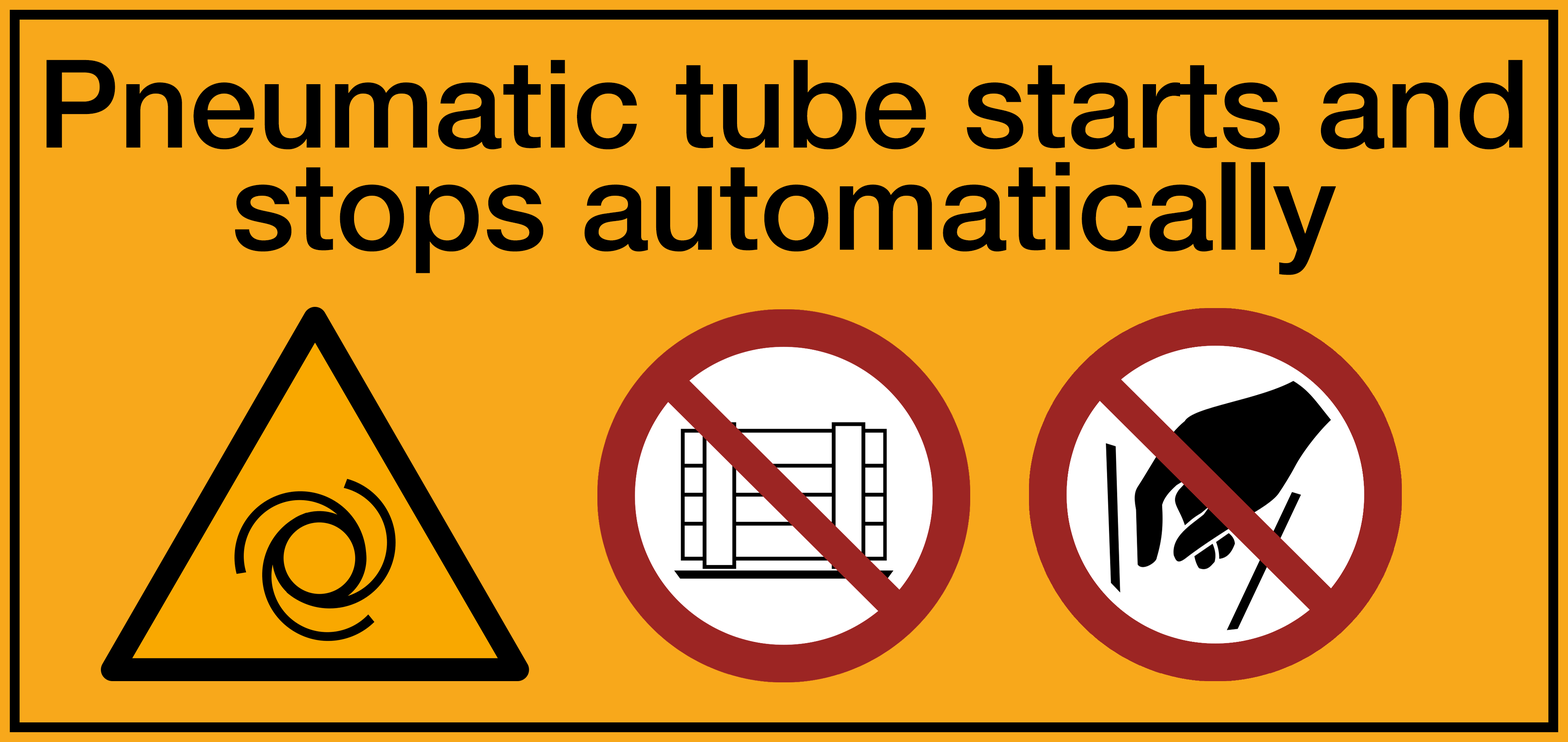
<style>
.page{position:relative;width:1568px;height:742px;background:#f8a81b}
.page>*{position:absolute;margin:0}
.t1{font:122.5px/102.1px "HelveticaNeue-Medium";color:#000000}
</style>
<div class="page">
<p class="t1" style="left:47px;top:60px;width:1476px;height:215px;text-align:center">Pneumatic tube starts and stops automatically</p>
</div>
